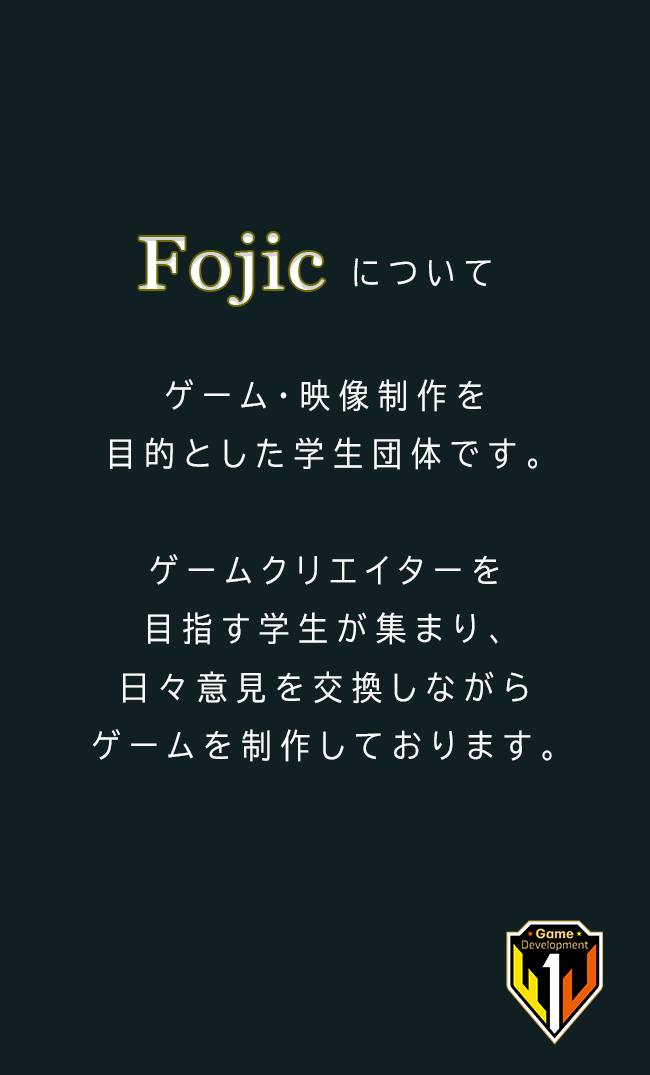
<style>
.page{position:relative;width:650px;height:1075px;background:#101f22}
.page>*{position:absolute;margin:0}
.t1{font:75px "Georgia";letter-spacing:0.02em;color:#ffffff;scale:1.11 1}
.t2{font:33.3px "BIZ-UDPGothic";letter-spacing:0.3em;color:#f9f9f9;scale:0.9 1}
</style>
<div class="page">
<p class="t1" style="left:139px;top:233px;width:186px;height:72px">Fojic</p>
<p class="t2" style="left:354px;top:258px;width:137px;height:29px">について</p>
<p class="t2" style="left:93px;top:379px;width:459px;height:383px;text-align:center">ゲーム・映像制作を<br>目的とした学生団体です。<br><br>ゲームクリエイターを<br>目指す学生が集まり、<br>日々意見を交換しながら<br>ゲームを制作しております。</p>
</div>
